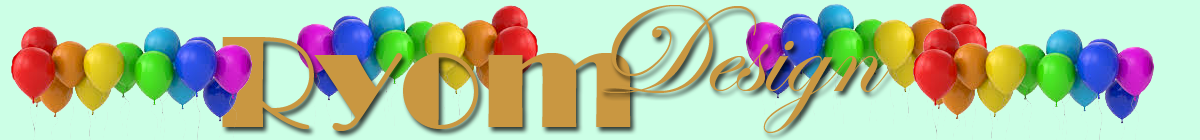
<style>
.page{position:relative;width:1200px;height:140px;background:#ccffe6}
.page>*{position:absolute;margin:0}
.t1{font:130px "EdwardianScriptITC";color:#c99741}
.t2{font:135px "Broadway";color:#c99741}
</style>
<div class="page">
<p class="t1" style="left:601px;top:5px;width:288px;height:129px">Design</p>
<p class="t2" style="left:222px;top:37px;width:409px;height:94px">Ryom</p>
</div>
